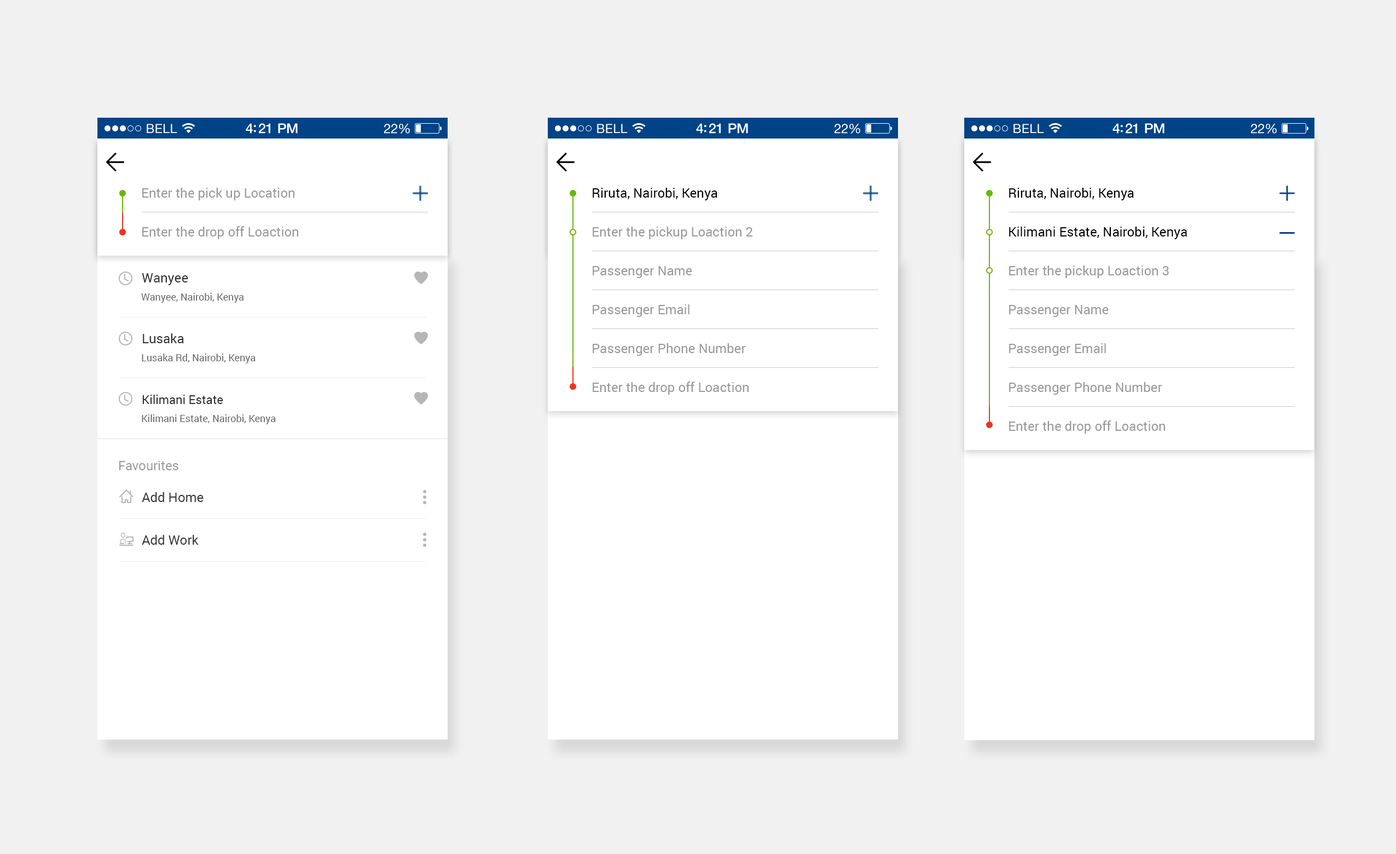
<style>
.page{position:relative;width:1396px;height:854px;background:#ffffff}
.page>*{position:absolute;margin:0}
.t1{font:13.1px "Roboto-Regular";color:#999999}
.t2{font:13.1px "Roboto-Regular"}
.t3{font:13.1px "Roboto-Regular";color:#000000}
.t4{font:13.1px "Roboto-Regular";color:#333333}
.t5{font:9.9px "Roboto-Regular";color:#666666}
.t6{font:12px "Roboto-Regular";color:#333333}
</style>
<div class="page">
<p class="t1" style="left:142px;top:188px;width:152px;height:12px">Enter the pick up Location</p>
<p class="t2" style="left:593px;top:188px;width:34px;height:10px">Home</p>
<p class="t3" style="left:593px;top:188px;width:125px;height:12px">Riruta, Nairobi, Kenya</p>
<p class="t2" style="left:1009px;top:188px;width:34px;height:10px">Home</p>
<p class="t3" style="left:1009px;top:188px;width:125px;height:12px">Riruta, Nairobi, Kenya</p>
<p class="t1" style="left:142px;top:226px;width:156px;height:13px">Enter the drop off Loaction</p>
<p class="t1" style="left:593px;top:227px;width:160px;height:12px">Enter the pickup Loaction 2</p>
<p class="t3" style="left:1009px;top:227px;width:178px;height:12px">Kilimani Estate, Nairobi, Kenya</p>
<p class="t1" style="left:593px;top:266px;width:99px;height:12px">Passenger Name</p>
<p class="t1" style="left:1009px;top:265px;width:160px;height:13px">Enter the pickup Loaction 3</p>
<p class="t4" style="left:142px;top:273px;width:46px;height:12px">Wanyee</p>
<p class="t5" style="left:141px;top:293px;width:103px;height:10px">Wanyee, Nairobi, Kenya</p>
<p class="t1" style="left:593px;top:304px;width:97px;height:13px">Passenger Email</p>
<p class="t1" style="left:1009px;top:305px;width:100px;height:12px">Passenger Name</p>
<p class="t4" style="left:143px;top:333px;width:41px;height:10px">Lusaka</p>
<p class="t5" style="left:142px;top:354px;width:114px;height:9px">Lusaka Rd, Nairobi, Kenya</p>
<p class="t1" style="left:593px;top:343px;width:153px;height:13px">Passenger Phone Number</p>
<p class="t1" style="left:1009px;top:343px;width:97px;height:13px">Passenger Email</p>
<p class="t1" style="left:593px;top:382px;width:156px;height:13px">Enter the drop off Loaction</p>
<p class="t1" style="left:1009px;top:382px;width:154px;height:13px">Passenger Phone Number</p>
<p class="t6" style="left:142px;top:395px;width:81px;height:9px">Kilimani Estate</p>
<p class="t5" style="left:142px;top:414px;width:134px;height:10px">Kilimani Estate, Nairobi, Kenya</p>
<p class="t1" style="left:1009px;top:420px;width:156px;height:14px">Enter the drop off Loaction</p>
<p class="t1" style="left:119px;top:461px;width:59px;height:9px">Favourites</p>
<p class="t4" style="left:142px;top:492px;width:62px;height:10px">Add Home</p>
<p class="t4" style="left:142px;top:535px;width:57px;height:10px">Add Work</p>
</div>
